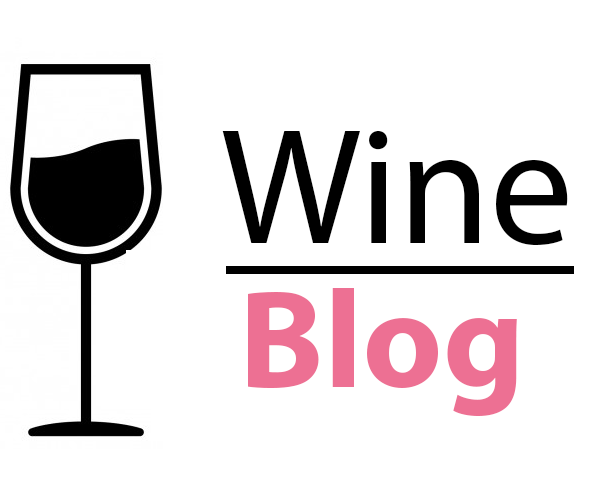
<style>
.page{position:relative;width:600px;height:485px;background:#ffffff}
.page>*{position:absolute;margin:0}
.t1{font:166.8px "MyriadPro-Regular";color:#000000}
.t2{font:140px "MyriadPro-Bold";color:#ed7093}
</style>
<div class="page">
<p class="t1" style="left:222px;top:131px;width:346px;height:114px">Wine</p>
<p class="t2" style="left:248px;top:288px;width:269px;height:128px">Blog</p>
</div>
